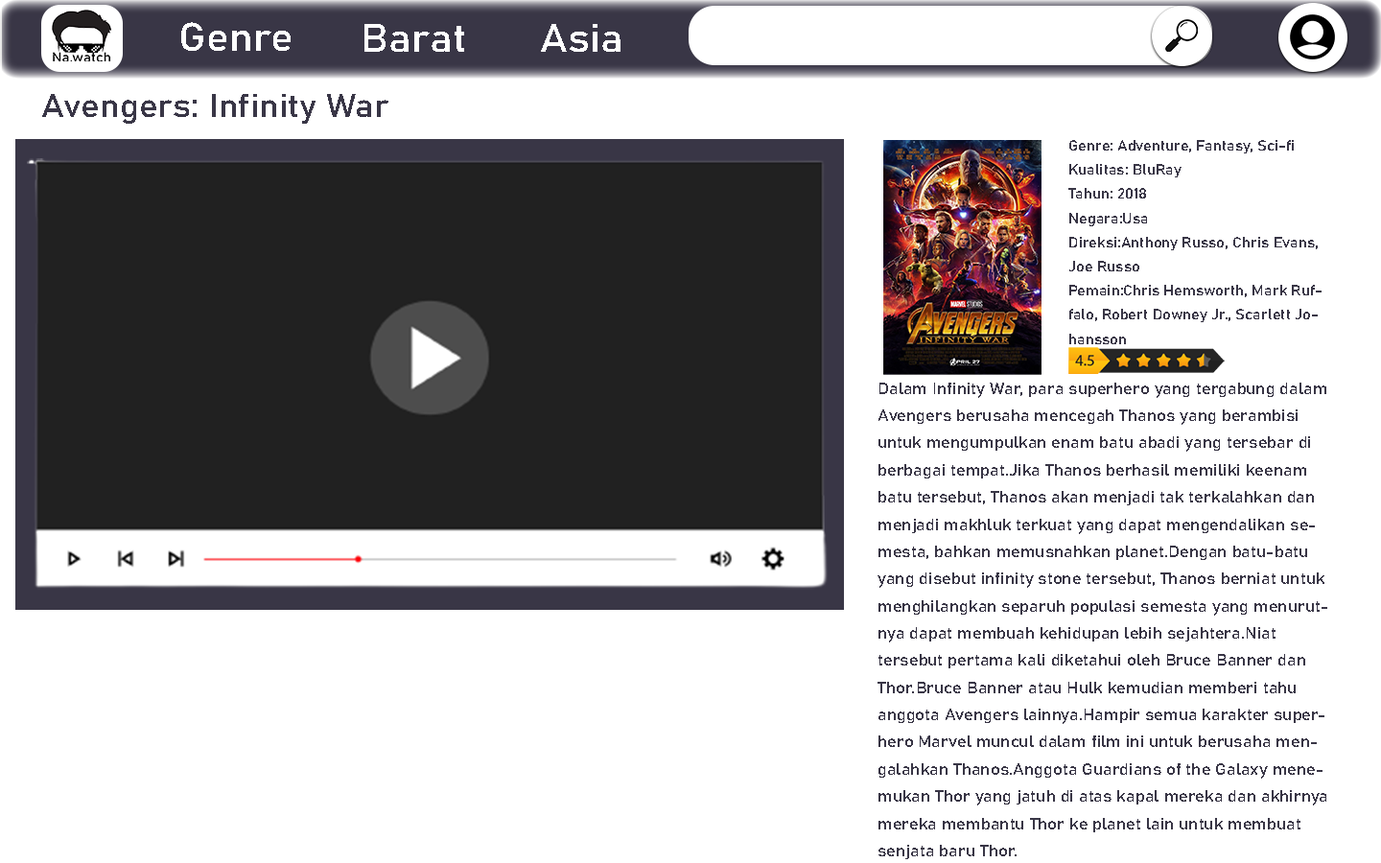
<style>
.page{position:relative;width:1381px;height:863px;background:#ffffff}
.page>*{position:absolute;margin:0}
.t1{font:39.5px "Bahnschrift";color:#ffffff;scale:1.08 1}
.t2{font:32.7px "Bahnschrift";color:#393646;scale:1.08 1}
.t3{font:14.3px "Bahnschrift";color:#393646;scale:1.08 1}
.t4{font:16.1px "Bahnschrift";color:#393646;scale:1.08 1}
</style>
<div class="page">
<p class="t1" style="left:181px;top:22px;width:110px;height:29px">Genre</p>
<p class="t1" style="left:365px;top:24px;width:99px;height:28px">Barat</p>
<p class="t1" style="left:541px;top:24px;width:80px;height:28px">Asia</p>
<p class="t2" style="left:42px;top:94px;width:346px;height:30px">Avengers: Infinity War</p>
<p class="t3" style="left:1069px;top:140px;width:253px;height:204px">Genre: Adventure, Fantasy, Sci-fi<br>Kualitas: BluRay<br>Tahun: 2018<br>Negara:Usa<br>Direksi:Anthony Russo, Chris Evans, Joe Russo<br>Pemain:Chris Hemsworth, Mark Ruffalo, Robert Downey Jr., Scarlett Johansson</p>
<p class="t4" style="left:878px;top:383px;width:450px;height:476px">Dalam Infinity War, para superhero yang tergabung dalam Avengers berusaha mencegah Thanos yang berambisi untuk mengumpulkan enam batu abadi yang tersebar di berbagai tempat.Jika Thanos berhasil memiliki keenam batu tersebut, Thanos akan menjadi tak terkalahkan dan menjadi makhluk terkuat yang dapat mengendalikan semesta, bahkan memusnahkan planet.Dengan batu-batu yang disebut infinity stone tersebut, Thanos berniat untuk menghilangkan separuh populasi semesta yang menurutnya dapat membuah kehidupan lebih sejahtera.Niat tersebut pertama kali diketahui oleh Bruce Banner dan Thor.Bruce Banner atau Hulk kemudian memberi tahu anggota Avengers lainnya.Hampir semua karakter superhero Marvel muncul dalam film ini untuk berusaha mengalahkan Thanos.Anggota Guardians of the Galaxy menemukan Thor yang jatuh di atas kapal mereka dan akhirnya mereka membantu Thor ke planet lain untuk membuat senjata baru Thor.<br><br>Nyawa Vision ikut terancam karena dirinya memiliki salah satu dari keenam infinity stone tersebut.<br><br>Steve Rogers kemudian membawa Vision dan Scarlett Witch ke Wakanda.<br><br>Captain America menganggap satu-satunya tempat paling aman dan memiliki teknologi paling canggih untuk menyelamatkan Vision adalah Wakanda.<br><br>Dengan keadaan yang terpisah-pisah, para anggota Avengers dan lainnya berusaha mencegah Thanos untuk mendapatkan infinity stone</p>
</div>
